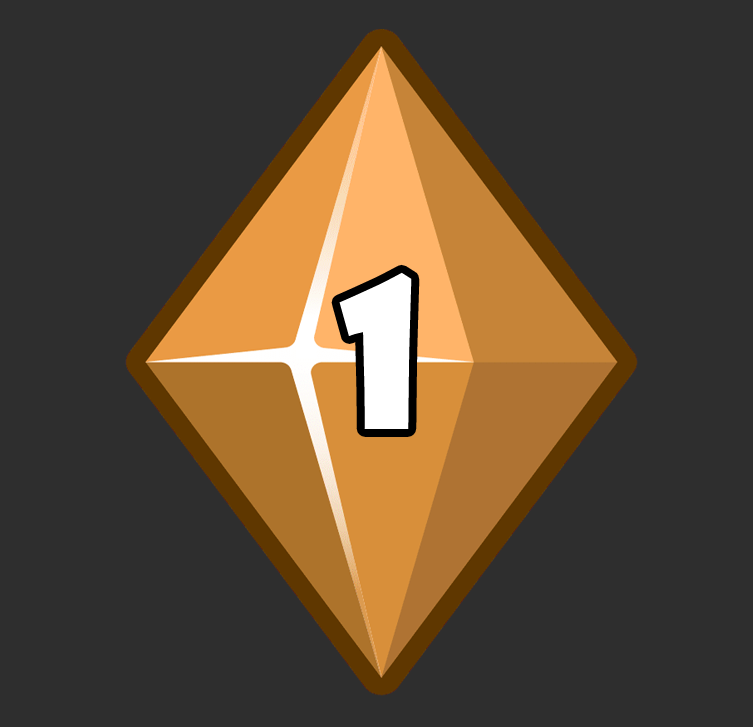
<style>
.page{position:relative;width:753px;height:727px;background:#2e2e2e}
.page>*{position:absolute;margin:0}
.t1{font:200px "ShowcardGothic-Reg";color:#ffffff}
</style>
<div class="page">
<p class="t1" style="left:339px;top:272px;width:73px;height:157px">1</p>
</div>
